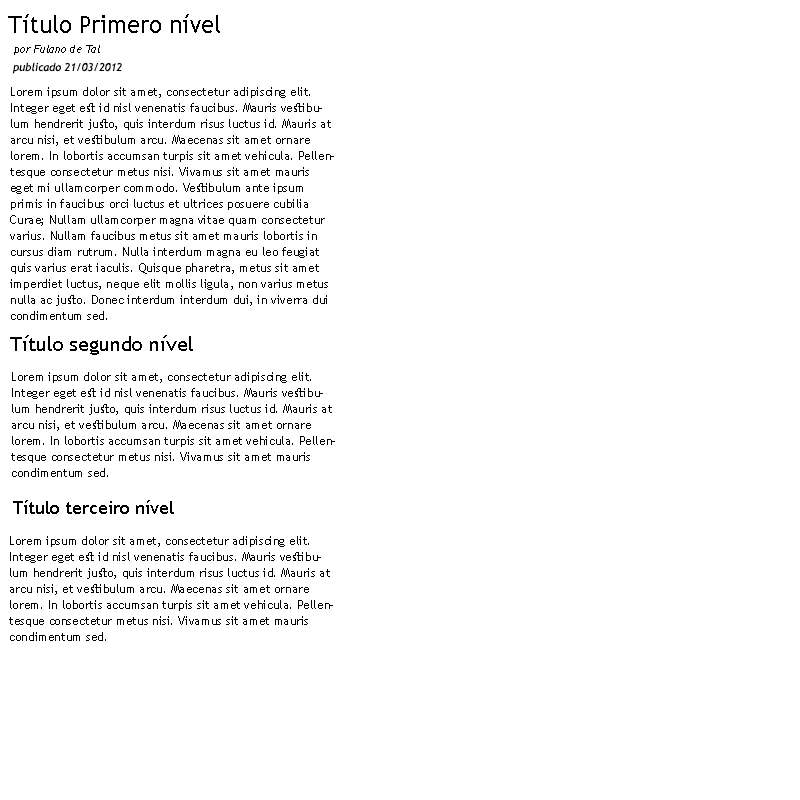
<style>
.page{position:relative;width:800px;height:800px;background:#ffffff}
.page>*{position:absolute;margin:0}
.t1{font:24px "TrebuchetMS";color:#000000}
.t2{font:11px "TrebuchetMS-Italic";color:#000000}
.t3{font:12px/16px "TrebuchetMS";color:#000000}
.t4{font:20px "TrebuchetMS";color:#000000}
.t5{font:18px "TrebuchetMS";color:#000000}
</style>
<div class="page">
<p class="t1" style="left:8px;top:14px;width:212px;height:19px">Título Primero nível</p>
<p class="t2" style="left:14px;top:45px;width:86px;height:10px">por Fulano de Tal</p>
<p class="t2" style="left:12px;top:62px;width:110px;height:12px">publicado 21/03/2012</p>
<p class="t3" style="left:10px;top:87px;width:324px;height:233px">Lorem ipsum dolor sit amet, consectetur adipiscing elit. Integer eget est id nisl venenatis faucibus. Mauris vestibulum hendrerit justo, quis interdum risus luctus id. Mauris at arcu nisi, et vestibulum arcu. Maecenas sit amet ornare lorem. In lobortis accumsan turpis sit amet vehicula. Pellentesque consectetur metus nisi. Vivamus sit amet mauris eget mi ullamcorper commodo. Vestibulum ante ipsum primis in faucibus orci luctus et ultrices posuere cubilia Curae; Nullam ullamcorper magna vitae quam consectetur varius. Nullam faucibus metus sit amet mauris lobortis in cursus diam rutrum. Nulla interdum magna eu leo feugiat quis varius erat iaculis. Quisque pharetra, metus sit amet imperdiet luctus, neque elit mollis ligula, non varius metus nulla ac justo. Donec interdum interdum dui, in viverra dui condimentum sed.</p>
<p class="t4" style="left:10px;top:335px;width:183px;height:20px">Título segundo nível</p>
<p class="t3" style="left:11px;top:372px;width:324px;height:105px">Lorem ipsum dolor sit amet, consectetur adipiscing elit. Integer eget est id nisl venenatis faucibus. Mauris vestibulum hendrerit justo, quis interdum risus luctus id. Mauris at arcu nisi, et vestibulum arcu. Maecenas sit amet ornare lorem. In lobortis accumsan turpis sit amet vehicula. Pellentesque consectetur metus nisi. Vivamus sit amet mauris condimentum sed.</p>
<p class="t5" style="left:13px;top:500px;width:161px;height:14px">Título terceiro nível</p>
<p class="t3" style="left:9px;top:536px;width:324px;height:105px">Lorem ipsum dolor sit amet, consectetur adipiscing elit. Integer eget est id nisl venenatis faucibus. Mauris vestibulum hendrerit justo, quis interdum risus luctus id. Mauris at arcu nisi, et vestibulum arcu. Maecenas sit amet ornare lorem. In lobortis accumsan turpis sit amet vehicula. Pellentesque consectetur metus nisi. Vivamus sit amet mauris condimentum sed.</p>
</div>
